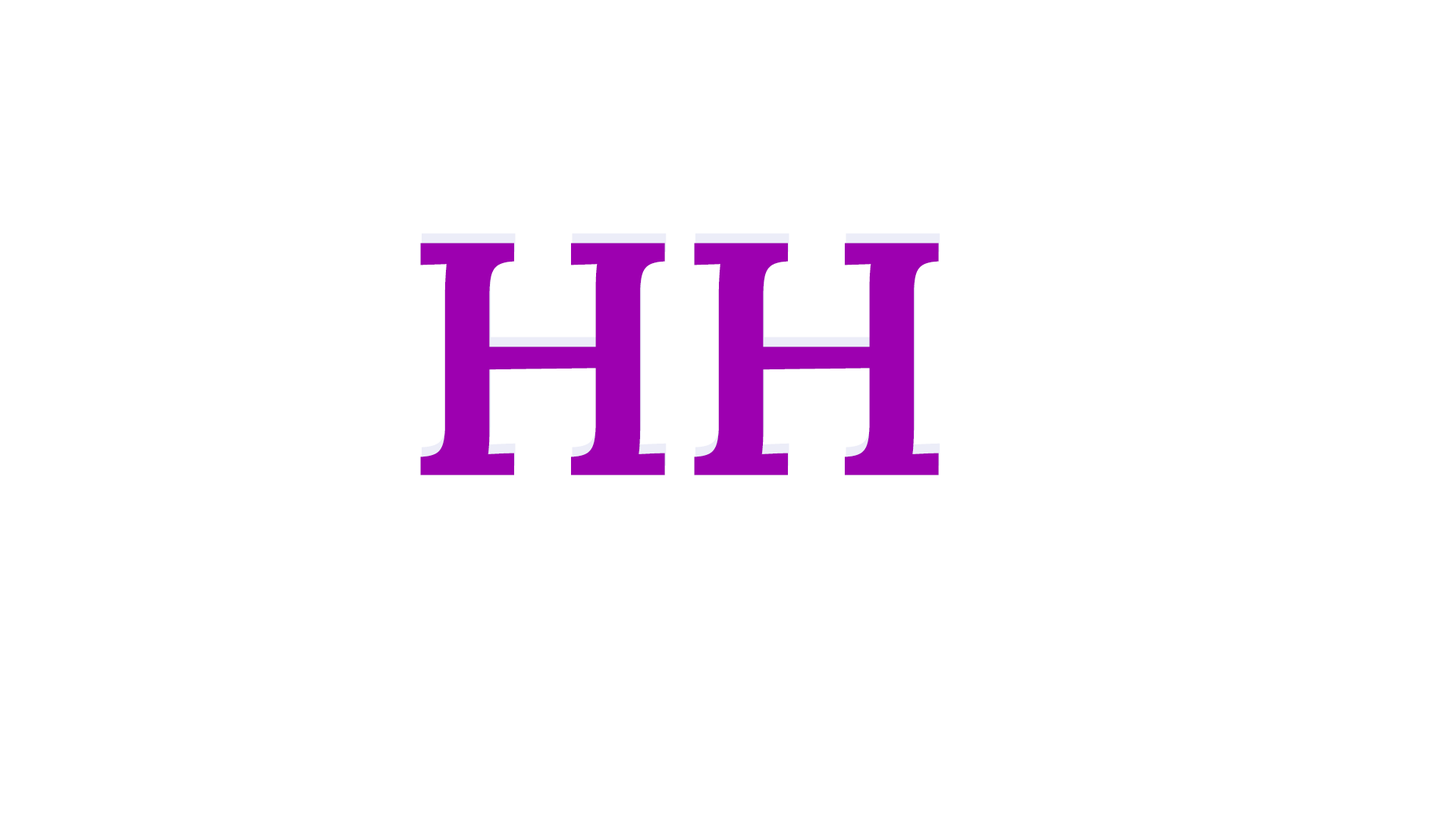
<style>
.page{position:relative;width:1456px;height:819px;background:#ffffff}
.page>*{position:absolute;margin:0}
.t1{font:568.4px "LoraRoman-SemiBold";letter-spacing:-0.02em;color:#9d00b0;scale:1.06 1}
</style>
<div class="page">
<p class="t1" style="left:422px;top:233px;width:518px;height:233px">HH</p>
<p class="t1" style="left:420px;top:243px;width:519px;height:232px">HH</p>
</div>
